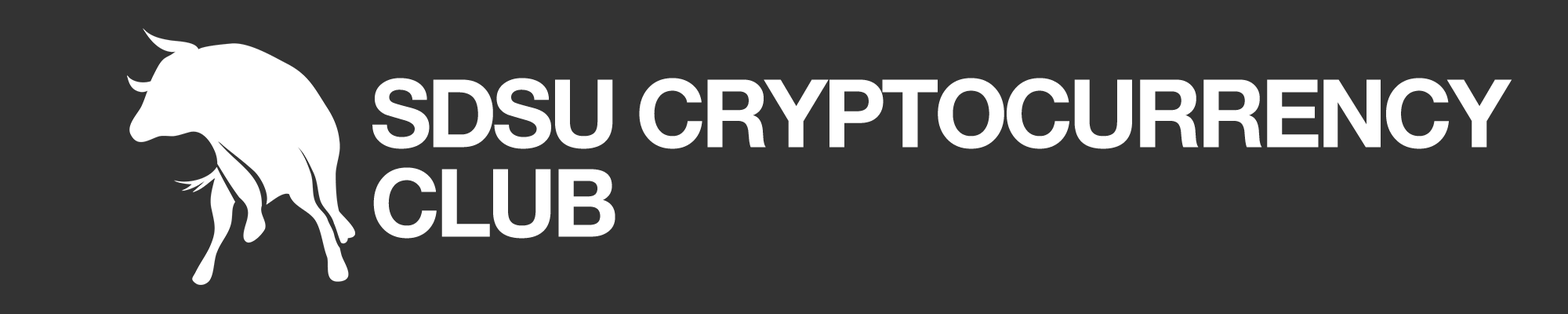
<style>
.page{position:relative;width:1568px;height:314px;background:#333333}
.page>*{position:absolute;margin:0}
.t1{font:94.1px/89.4px "HelveticaNeueBold";letter-spacing:-0.047em;color:#ffffff}
</style>
<div class="page">
<p class="t1" style="left:372px;top:78px;width:1140px;height:160px">SDSU CRYPTOCURRENCY<br>CLUB</p>
</div>
